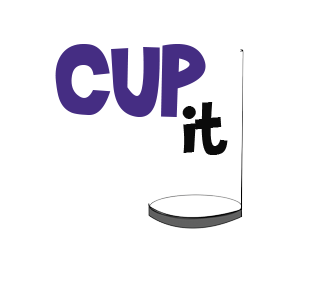
<style>
.page{position:relative;width:335px;height:304px;background:#ffffff}
.page>*{position:absolute;margin:0}
.t1{font:125px "BradyBunchRemastered";color:#452d83}
.t2{font:83.3px "BradyBunchRemastered";color:#0b0b0b}
</style>
<div class="page">
<p class="t1" style="left:55px;top:44px;width:151px;height:73px">CUP</p>
<p class="t2" style="left:182px;top:102px;width:46px;height:53px">it</p>
</div>
